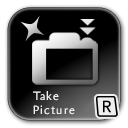
<style>
.page{position:relative;width:128px;height:128px;background:#000000}
.page>*{position:absolute;margin:0}
.t1{font:12px/14px "Amira-Light";letter-spacing:0.1em;color:#efefef}
</style>
<div class="page">
<p class="t1" style="left:33px;top:91px;width:42px;height:24px">Take<br>Picture</p>
</div>
